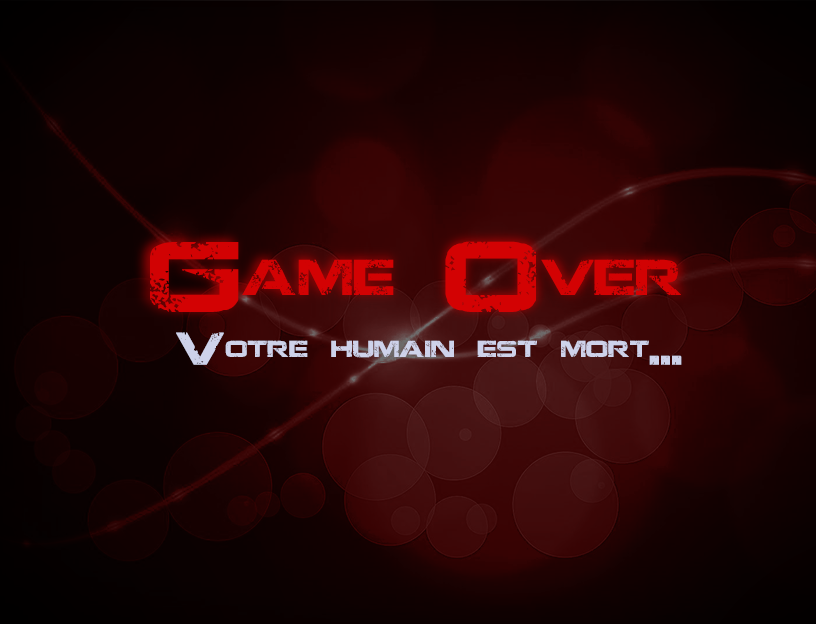
<style>
.page{position:relative;width:816px;height:624px}
.page>*{position:absolute;margin:0}
.t1{font:100px "JacintoSans";color:#d30203}
.t2{font:45.8px "JacintoSans";color:#ced2ea}
</style>
<div class="page">
<p class="t1" style="left:150px;top:241px;width:531px;height:71px">Game Over</p>
<p class="t2" style="left:176px;top:332px;width:506px;height:33px">Votre humain est mort...</p>
</div>
